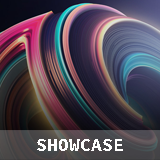
<style>
.page{position:relative;width:160px;height:160px}
.page>*{position:absolute;margin:0}
.t1{font:18px "SourceCodePro-Bold";color:#ffffff}
</style>
<div class="page">
<p class="t1" style="left:37px;top:139px;width:86px;height:12px">SHOWCASE</p>
</div>
